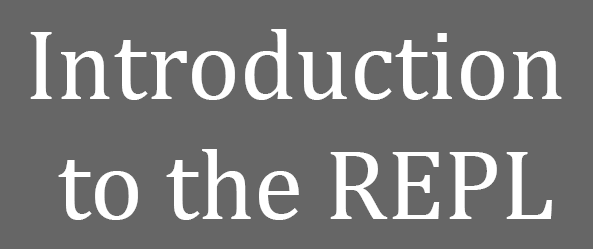
<style>
.page{position:relative;width:593px;height:249px;background:#666666}
.page>*{position:absolute;margin:0}
.t1{font:100px "Cambria";color:#ffffff}
</style>
<div class="page">
<p class="t1" style="left:30px;top:29px;width:532px;height:191px;text-align:center">Introduction <br>to the REPL</p>
</div>
